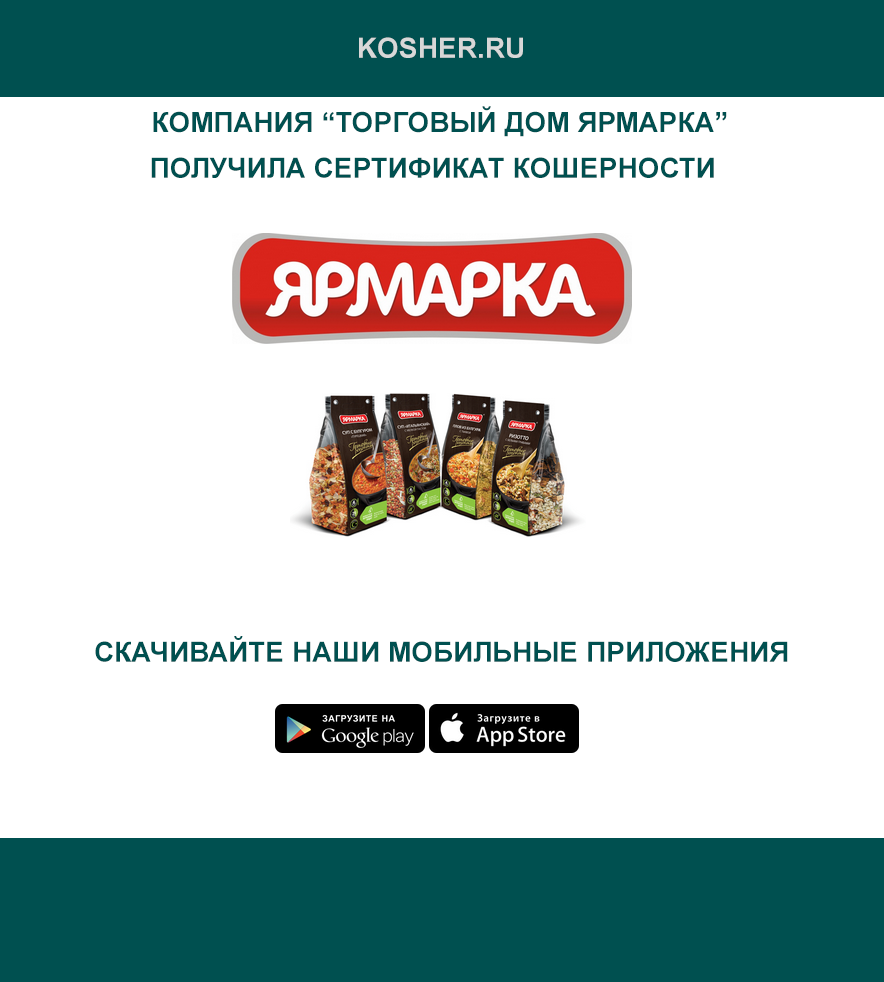
<style>
.page{position:relative;width:884px;height:982px;background:#ffffff}
.page>*{position:absolute;margin:0}
.t1{font:27.8px "Arial-BoldMT";color:#d8d8d8}
.t2{font:27.8px "Arial-BoldMT";color:#005050}
</style>
<div class="page">
<p class="t1" style="left:359px;top:37px;width:164px;height:21px">KOSHER.RU</p>
<p class="t2" style="left:153px;top:106px;width:574px;height:31px">КОМПАНИЯ “ТОРГОВЫЙ ДОМ ЯРМАРКА”</p>
<p class="t2" style="left:151px;top:157px;width:563px;height:21px">ПОЛУЧИЛА СЕРТИФИКАТ КОШЕРНОСТИ</p>
<p class="t2" style="left:95px;top:636px;width:693px;height:26px">СКАЧИВАЙТЕ НАШИ МОБИЛЬНЫЕ ПРИЛОЖЕНИЯ</p>
</div>
